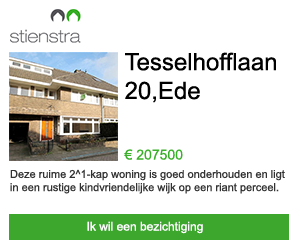
<style>
.page{position:relative;width:300px;height:250px;background:#ffffff}
.page>*{position:absolute;margin:0}
.t1{font:24px "ArialMT";color:#000000}
.t2{font:14px "ArialMT";color:#3aaf29}
.t3{font:11px "ArialMT";color:#333333}
.t4{font:12px "ArialMT";color:#ffffff}
</style>
<div class="page">
<p class="t1" style="left:125px;top:52px;width:151px;height:51px">Tesselhofflaan 20,Ede</p>
<p class="t2" style="left:124px;top:149px;width:59px;height:11px">€ 207500</p>
<p class="t3" style="left:10px;top:169px;width:275px;height:25px">Deze ruime 2^1-kap woning is goed onderhouden en ligt in een rustige kindvriendelijke wijk op een riant perceel.</p>
<p class="t4" style="left:87px;top:221px;width:116px;height:13px">Ik wil een bezichtiging</p>
</div>
